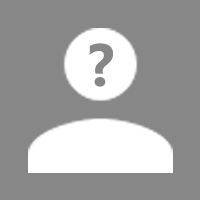
<style>
.page{position:relative;width:200px;height:200px;background:#878787}
.page>*{position:absolute;margin:0}
.t1{font:60px "MicrosoftPhagsPa-Bold";letter-spacing:-0.075em;color:#878787}
</style>
<div class="page">
<p class="t1" style="left:89px;top:43px;width:24px;height:44px">?</p>
</div>
